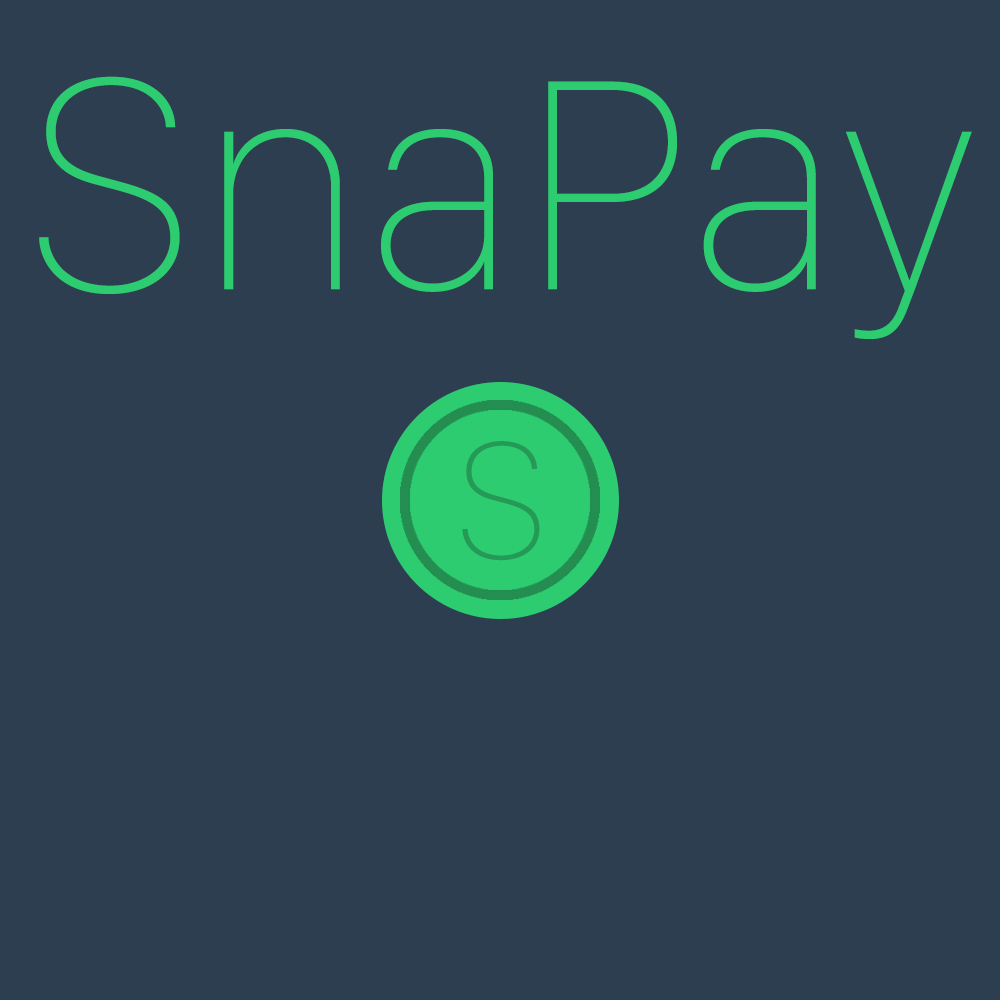
<style>
.page{position:relative;width:1000px;height:1000px;background:#2c3e50}
.page>*{position:absolute;margin:0}
.t1{font:312.6px "SanFranciscoDisplay-Ultralight";color:#2ecc71}
.t2{font:171.1px "SanFranciscoDisplay-Ultralight";color:#259a56}
</style>
<div class="page">
<p class="t1" style="left:39px;top:76px;width:933px;height:263px">SnaPay</p>
<p class="t2" style="left:462px;top:441px;width:78px;height:120px">S</p>
</div>
